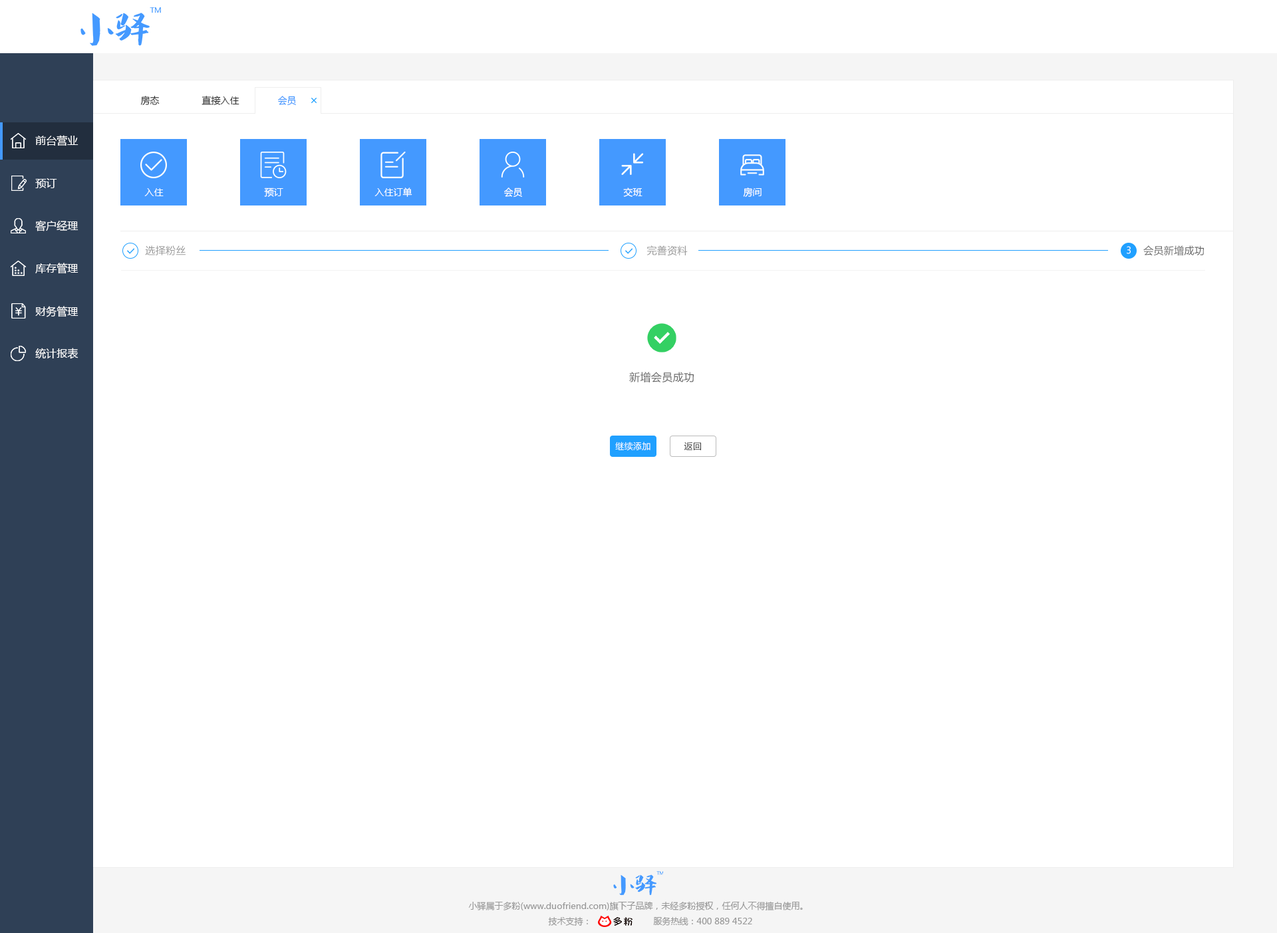
<style>
.page{position:relative;width:1277px;height:933px;background:#ffffff}
.page>*{position:absolute;margin:0}
.t1{font:9.3px "MicrosoftYaHei";color:#333333}
.t2{font:9.3px "MicrosoftYaHei";color:#4499ff}
.t3{font:10.6px "MicrosoftYaHei";color:#ffffff}
.t4{font:9.3px "MicrosoftYaHei";color:#ffffff}
.t5{font:10px "MicrosoftYaHei";letter-spacing:0.025em;color:#999999}
.t6{font:10px "MicrosoftYaHei";letter-spacing:0.025em;color:#666666}
.t7{font:9.3px "MicrosoftYaHei";letter-spacing:0.025em;color:#ffffff}
.t8{font:10.6px "MicrosoftYaHei";letter-spacing:0.025em;color:#666666}
.t9{font:8.6px "MicrosoftYaHei";letter-spacing:0.025em;color:#ffffff}
.t10{font:8.6px "MicrosoftYaHei";letter-spacing:0.025em;color:#333333}
.t11{font:8.6px "MicrosoftYaHei";color:#999999}
</style>
<div class="page">
<p class="t1" style="left:140px;top:96px;width:20px;height:9px">房态</p>
<p class="t1" style="left:202px;top:96px;width:38px;height:9px">直接入住</p>
<p class="t2" style="left:278px;top:96px;width:18px;height:10px">会员</p>
<p class="t3" style="left:35px;top:135px;width:44px;height:11px">前台营业</p>
<p class="t3" style="left:35px;top:178px;width:22px;height:10px">预订</p>
<p class="t4" style="left:144px;top:188px;width:20px;height:8px">入住</p>
<p class="t4" style="left:264px;top:188px;width:19px;height:9px">预订</p>
<p class="t4" style="left:375px;top:188px;width:38px;height:9px">入住订单</p>
<p class="t4" style="left:504px;top:188px;width:18px;height:10px">会员</p>
<p class="t4" style="left:623px;top:188px;width:20px;height:9px">交班</p>
<p class="t4" style="left:743px;top:188px;width:19px;height:9px">房间</p>
<p class="t3" style="left:35px;top:220px;width:44px;height:12px">客户经理</p>
<p class="t5" style="left:145px;top:246px;width:41px;height:9px">选择粉丝</p>
<p class="t5" style="left:647px;top:246px;width:41px;height:10px">完善资料</p>
<p class="t6" style="left:1144px;top:246px;width:60px;height:10px">会员新增成功</p>
<p class="t7" style="left:1127px;top:246px;width:4px;height:8px">3</p>
<p class="t3" style="left:35px;top:263px;width:44px;height:11px">库存管理</p>
<p class="t3" style="left:35px;top:306px;width:44px;height:11px">财务管理</p>
<p class="t3" style="left:35px;top:348px;width:44px;height:11px">统计报表</p>
<p class="t8" style="left:629px;top:372px;width:65px;height:11px">新增会员成功</p>
<p class="t9" style="left:615px;top:442px;width:36px;height:9px">继续添加</p>
<p class="t10" style="left:684px;top:442px;width:17px;height:8px">返回</p>
<p class="t11" style="left:468px;top:902px;width:335px;height:9px">小驿属于多粉(www.duofriend.com)旗下子品牌，未经多粉授权，任何人不得擅自使用。</p>
<p class="t11" style="left:548px;top:917px;width:40px;height:9px">技术支持：</p>
<p class="t11" style="left:653px;top:917px;width:99px;height:9px">服务热线：400 889 4522</p>
</div>
